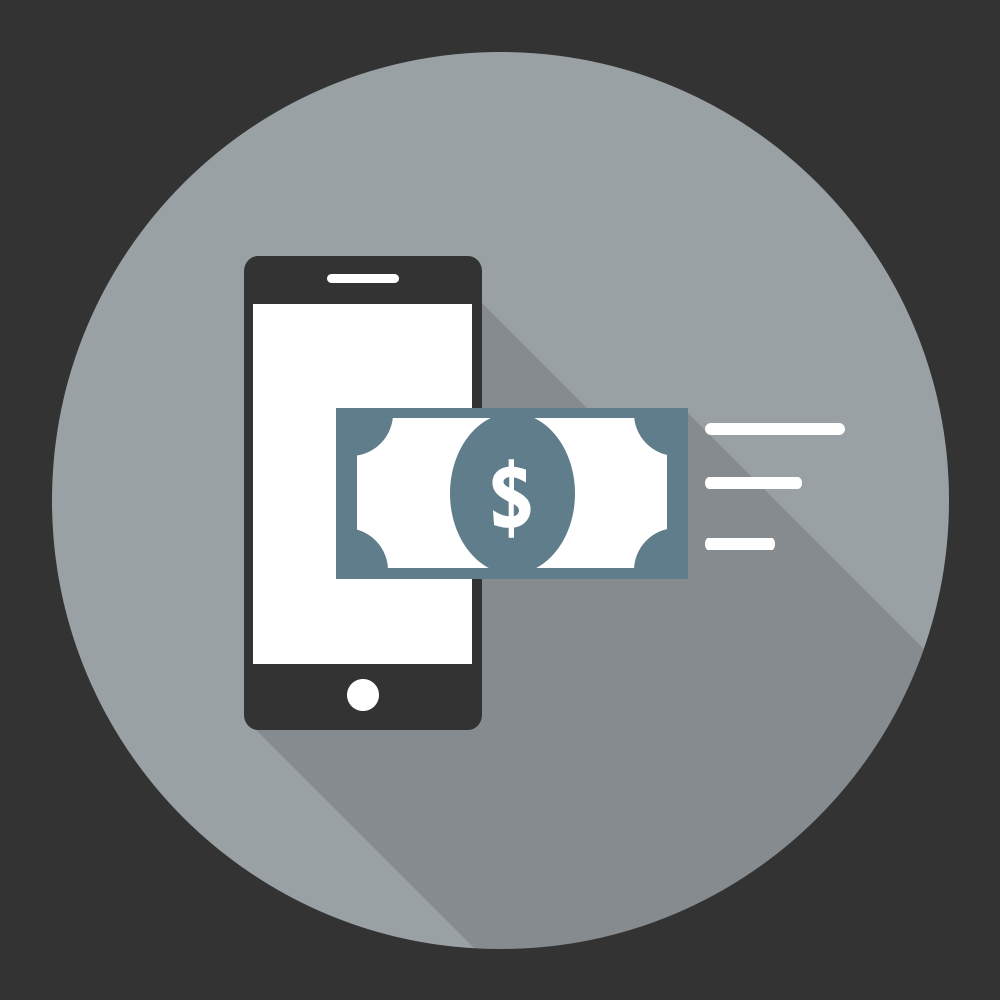
<style>
.page{position:relative;width:1000px;height:1000px;background:#333333}
.page>*{position:absolute;margin:0}
.t1{font:81.3px "Geometric415BT-BlackA";letter-spacing:0.48em;color:#ffffff}
</style>
<div class="page">
<p class="t1" style="left:492px;top:459px;width:39px;height:79px">$</p>
</div>
